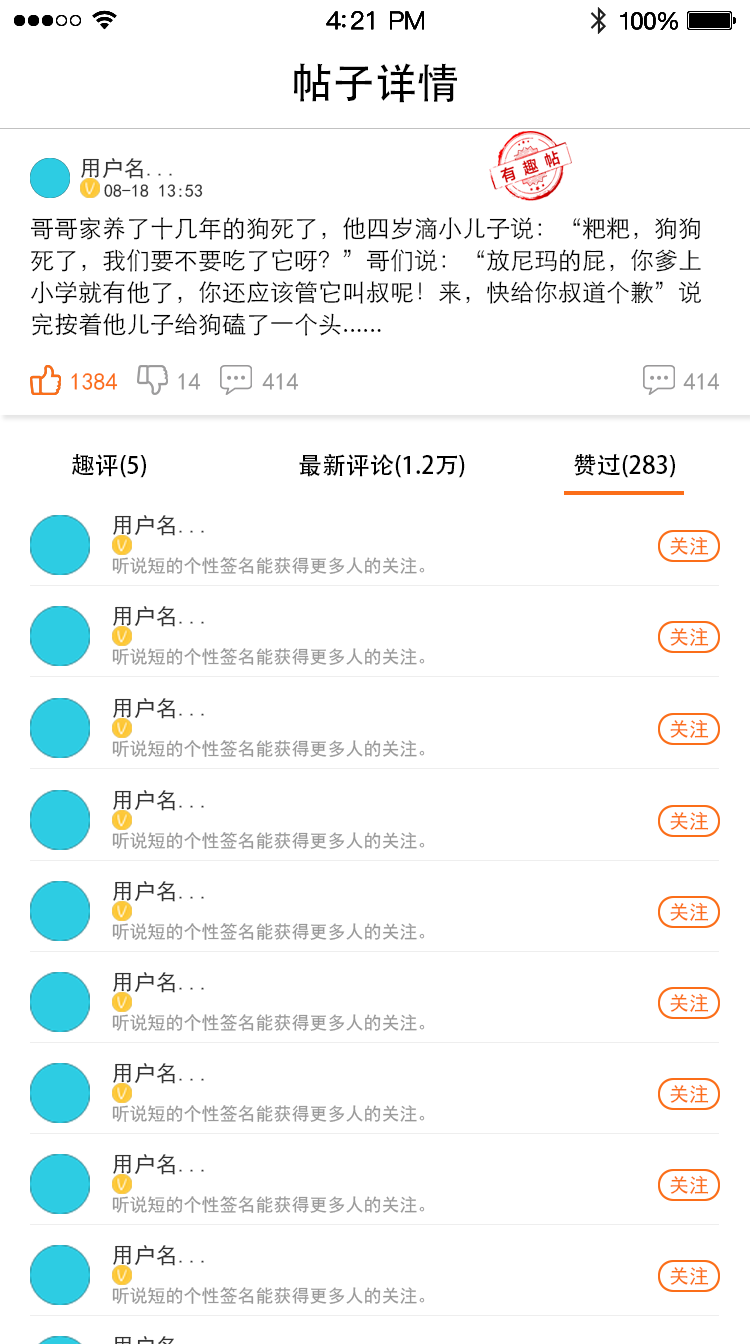
<style>
.page{position:relative;width:750px;height:1344px;background:#ffffff}
.page>*{position:absolute;margin:0}
.t1{font:42px "PingFang-SC-Medium";color:#000000}
.t2{font:22px "SimHei";color:#333333}
.t3{font:18px "SimHei";color:#333333}
.t4{font:24px/32px "STXihei";color:#000000}
.t5{font:24px "SimHei";color:#fb6e19}
.t6{font:24px "SimHei";color:#999999}
.t7{font:24px "AdobeHeitiStd-Regular";color:#000000}
.t8{font:20px "SimHei";color:#fb6e19}
.t9{font:18px "SimHei";color:#999999}
</style>
<div class="page">
<p class="t1" style="left:294px;top:63px;width:163px;height:40px">帖子详情</p>
<p class="t2" style="left:81px;top:158px;width:91px;height:21px">用户名...</p>
<p class="t3" style="left:104px;top:184px;width:99px;height:13px">08-18 13:53</p>
<p class="t4" style="left:30px;top:217px;width:671px;height:119px">哥哥家养了十几年的狗死了，他四岁滴小儿子说：“粑粑，狗狗<br>死了，我们要不要吃了它呀？”哥们说：“放尼玛的屁，你爹上<br>小学就有他了，你还应该管它叫叔呢！来，快给你叔道个歉”说<br>完按着他儿子给狗磕了一个头......</p>
<p class="t5" style="left:71px;top:373px;width:47px;height:17px">1384</p>
<p class="t6" style="left:178px;top:373px;width:23px;height:17px">14</p>
<p class="t6" style="left:262px;top:373px;width:37px;height:17px">414</p>
<p class="t6" style="left:683px;top:373px;width:37px;height:17px">414</p>
<p class="t7" style="left:72px;top:454px;width:74px;height:24px">趣评(5)</p>
<p class="t7" style="left:299px;top:454px;width:166px;height:24px">最新评论(1.2万)</p>
<p class="t7" style="left:574px;top:454px;width:101px;height:24px">赞过(283)</p>
<p class="t2" style="left:113px;top:515px;width:91px;height:21px">用户名...</p>
<p class="t8" style="left:670px;top:536px;width:39px;height:19px">关注</p>
<p class="t9" style="left:112px;top:557px;width:313px;height:17px">听说短的个性签名能获得更多人的关注。</p>
<p class="t2" style="left:113px;top:606px;width:91px;height:21px">用户名...</p>
<p class="t8" style="left:670px;top:627px;width:39px;height:19px">关注</p>
<p class="t9" style="left:112px;top:648px;width:313px;height:17px">听说短的个性签名能获得更多人的关注。</p>
<p class="t2" style="left:113px;top:698px;width:91px;height:21px">用户名...</p>
<p class="t8" style="left:670px;top:719px;width:39px;height:19px">关注</p>
<p class="t9" style="left:112px;top:740px;width:313px;height:17px">听说短的个性签名能获得更多人的关注。</p>
<p class="t2" style="left:113px;top:790px;width:91px;height:21px">用户名...</p>
<p class="t8" style="left:670px;top:811px;width:39px;height:19px">关注</p>
<p class="t9" style="left:112px;top:832px;width:313px;height:17px">听说短的个性签名能获得更多人的关注。</p>
<p class="t2" style="left:113px;top:881px;width:91px;height:21px">用户名...</p>
<p class="t8" style="left:670px;top:902px;width:39px;height:19px">关注</p>
<p class="t9" style="left:112px;top:923px;width:313px;height:17px">听说短的个性签名能获得更多人的关注。</p>
<p class="t2" style="left:113px;top:972px;width:91px;height:21px">用户名...</p>
<p class="t8" style="left:670px;top:993px;width:39px;height:19px">关注</p>
<p class="t9" style="left:112px;top:1014px;width:313px;height:17px">听说短的个性签名能获得更多人的关注。</p>
<p class="t2" style="left:113px;top:1063px;width:91px;height:21px">用户名...</p>
<p class="t8" style="left:670px;top:1084px;width:39px;height:19px">关注</p>
<p class="t9" style="left:112px;top:1105px;width:313px;height:17px">听说短的个性签名能获得更多人的关注。</p>
<p class="t2" style="left:113px;top:1154px;width:91px;height:21px">用户名...</p>
<p class="t8" style="left:670px;top:1175px;width:39px;height:19px">关注</p>
<p class="t9" style="left:112px;top:1196px;width:313px;height:17px">听说短的个性签名能获得更多人的关注。</p>
<p class="t2" style="left:113px;top:1245px;width:91px;height:21px">用户名...</p>
<p class="t8" style="left:670px;top:1266px;width:39px;height:19px">关注</p>
<p class="t9" style="left:112px;top:1287px;width:313px;height:17px">听说短的个性签名能获得更多人的关注。</p>
</div>
